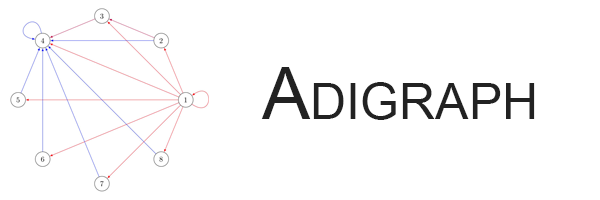
<style>
.page{position:relative;width:600px;height:200px;background:#ffffff}
.page>*{position:absolute;margin:0}
.t1{font:71.8px "ArialMT";color:#222222;font-variant:small-caps}
</style>
<div class="page">
<p class="t1" style="left:261px;top:67px;width:274px;height:53px">Adigraph</p>
</div>
